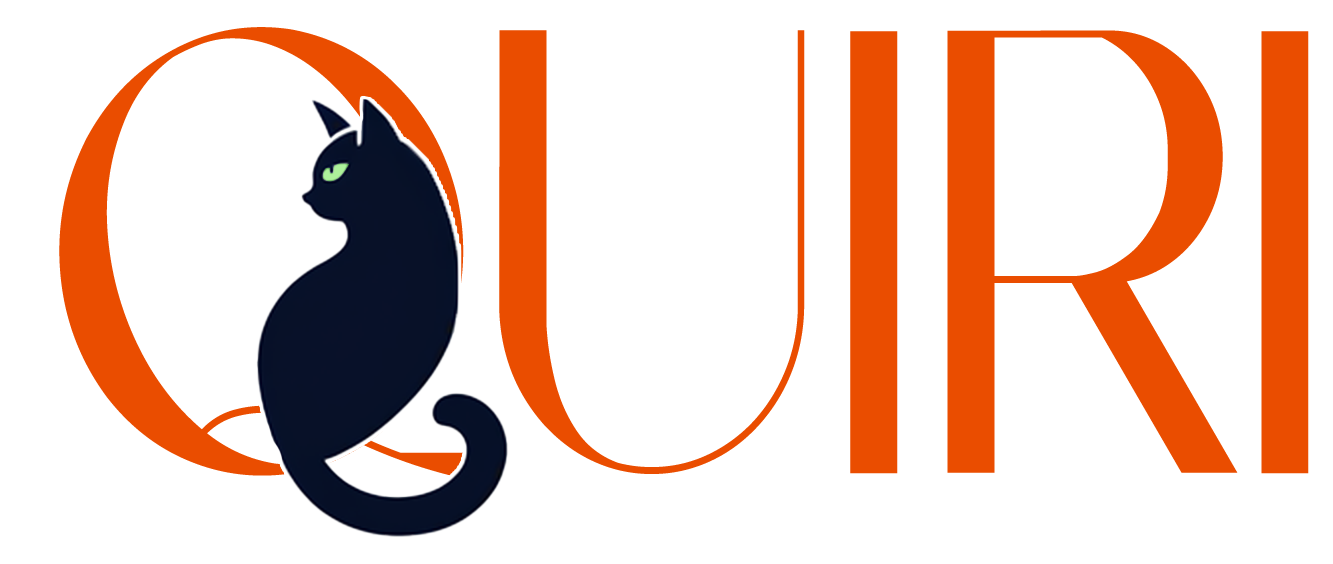
<style>
.page{position:relative;width:1333px;height:564px;background:#ffffff}
.page>*{position:absolute;margin:0}
.t1{font:345px "LeAmatcky-PersonalUse";letter-spacing:0.025em;color:#ea4d00;scale:0.9 1}
</style>
<div class="page">
<p class="t1" style="left:59px;top:27px;width:1250px;height:451px">QUIRI</p>
</div>
